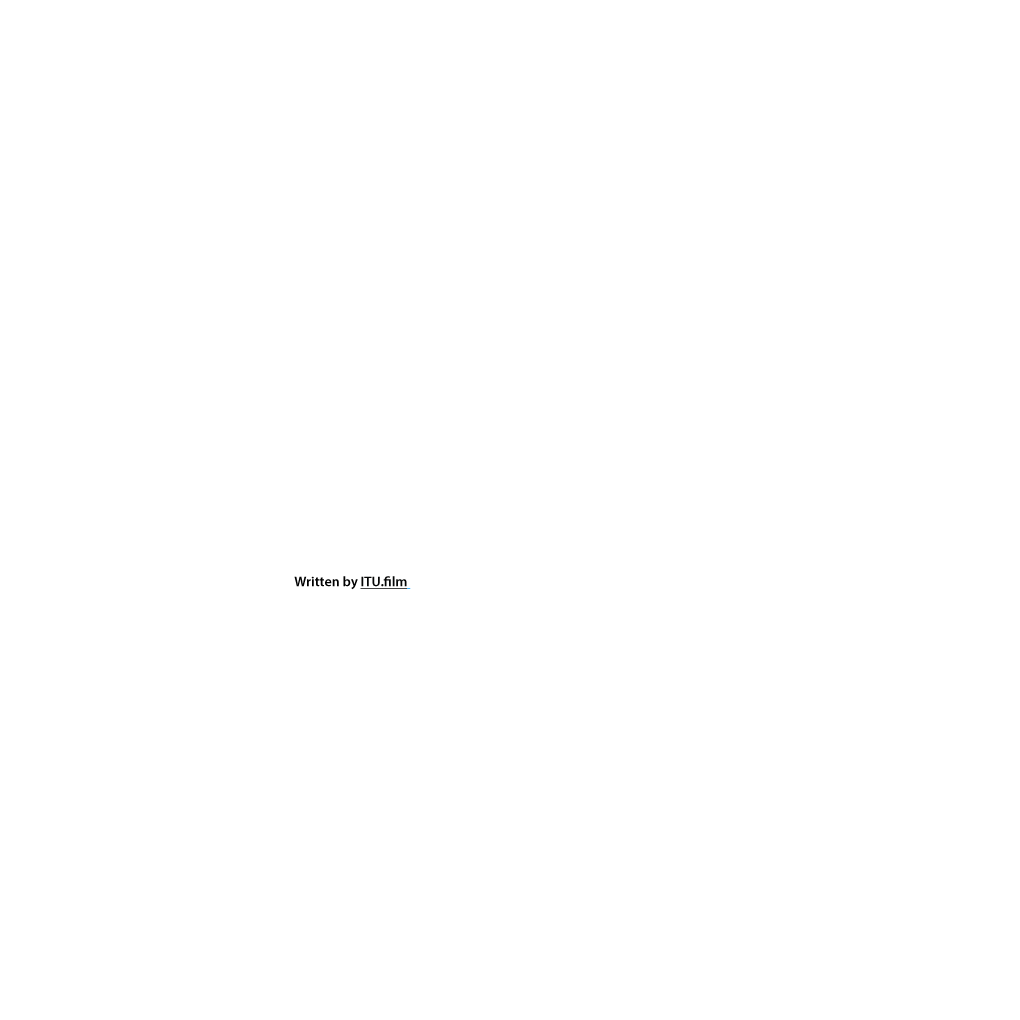
<style>
.page{position:relative;width:1020px;height:1020px;background:#ffffff}
.page>*{position:absolute;margin:0}
.t1{font:14px "MyriadPro-Semibold";color:#000000}
.t2{font:14px "MyriadPro-Semibold";color:#050606;text-decoration:underline}
</style>
<div class="page">
<p class="t1" style="left:294px;top:576px;width:117px;height:14px">Written by <span class="t2">ITU.film</span></p>
</div>
